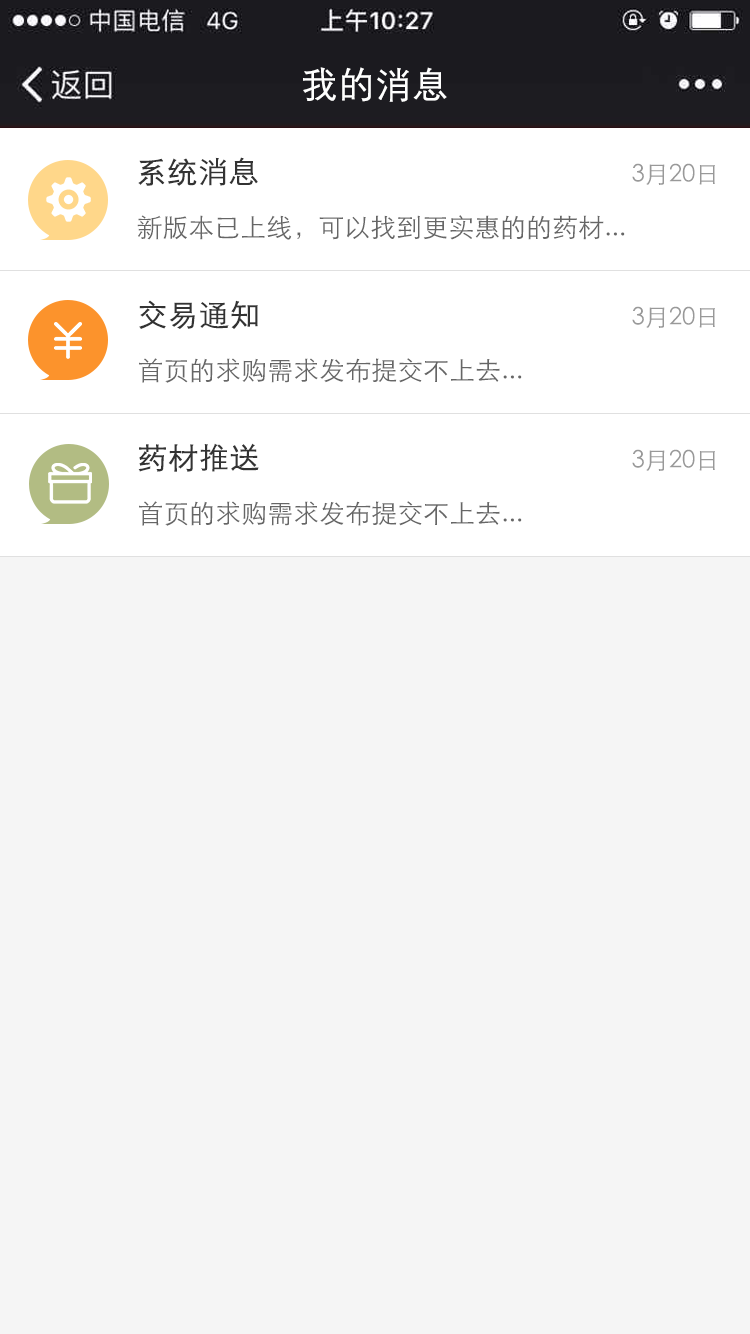
<style>
.page{position:relative;width:750px;height:1334px;background:#f5f5f5}
.page>*{position:absolute;margin:0}
.t1{font:36px "FZZDXJW--GB1-0";color:#ffffff;font-weight:bold}
.t2{font:30px "STXihei";color:#333333;font-weight:bold}
.t3{font:24px "STXihei";color:#999999}
.t4{font:26px "STXihei";color:#666666}
</style>
<div class="page">
<p class="t1" style="left:303px;top:67px;width:144px;height:35px">我的消息</p>
<p class="t2" style="left:138px;top:157px;width:120px;height:29px">系统消息</p>
<p class="t3" style="left:632px;top:163px;width:83px;height:22px">3月20日</p>
<p class="t4" style="left:137px;top:215px;width:488px;height:25px">新版本已上线，可以找到更实惠的的药材...</p>
<p class="t2" style="left:139px;top:300px;width:119px;height:29px">交易通知</p>
<p class="t3" style="left:632px;top:306px;width:83px;height:22px">3月20日</p>
<p class="t4" style="left:139px;top:358px;width:383px;height:25px">首页的求购需求发布提交不上去...</p>
<p class="t2" style="left:138px;top:443px;width:121px;height:29px">药材推送</p>
<p class="t3" style="left:632px;top:449px;width:83px;height:22px">3月20日</p>
<p class="t4" style="left:139px;top:501px;width:383px;height:25px">首页的求购需求发布提交不上去...</p>
</div>
